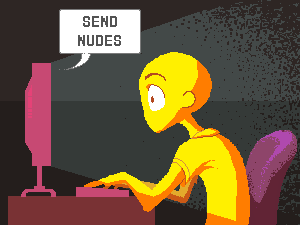
<style>
.page{position:relative;width:300px;height:225px}
.page>*{position:absolute;margin:0}
.t1{font:16px "Power-Clear-Bold";color:#535353}
</style>
<div class="page">
<p class="t1" style="left:78px;top:16px;width:43px;height:30px;text-align:center">SEND<br>NUDES</p>
</div>
